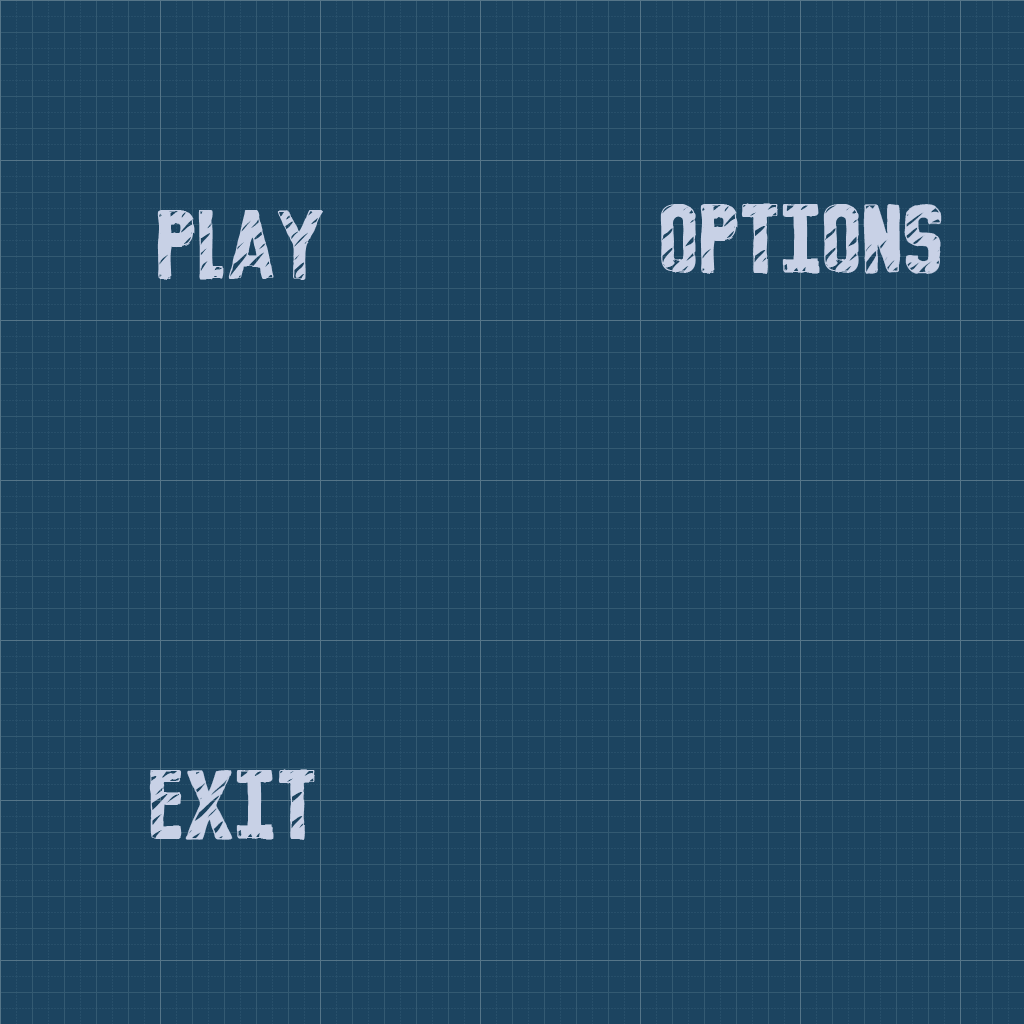
<style>
.page{position:relative;width:1024px;height:1024px;background:#1c4460}
.page>*{position:absolute;margin:0}
.t1{font:100px "BlueprintBlock";color:#c8d1e6}
</style>
<div class="page">
<p class="t1" style="left:660px;top:203px;width:282px;height:71px">Options</p>
<p class="t1" style="left:157px;top:210px;width:166px;height:70px">PLAY</p>
<p class="t1" style="left:149px;top:769px;width:166px;height:71px">Exit</p>
</div>
